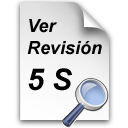
<style>
.page{position:relative;width:128px;height:128px;background:#ffffff}
.page>*{position:absolute;margin:0}
.t1{font:18px "Arial-BoldItalicMT";color:#000000}
.t2{font:30px "Arial-BoldItalicMT";color:#000000}
</style>
<div class="page">
<p class="t1" style="left:27px;top:19px;width:75px;height:72px">Ver <br>Revisión<br><span class="t2">5 S</span></p>
</div>
